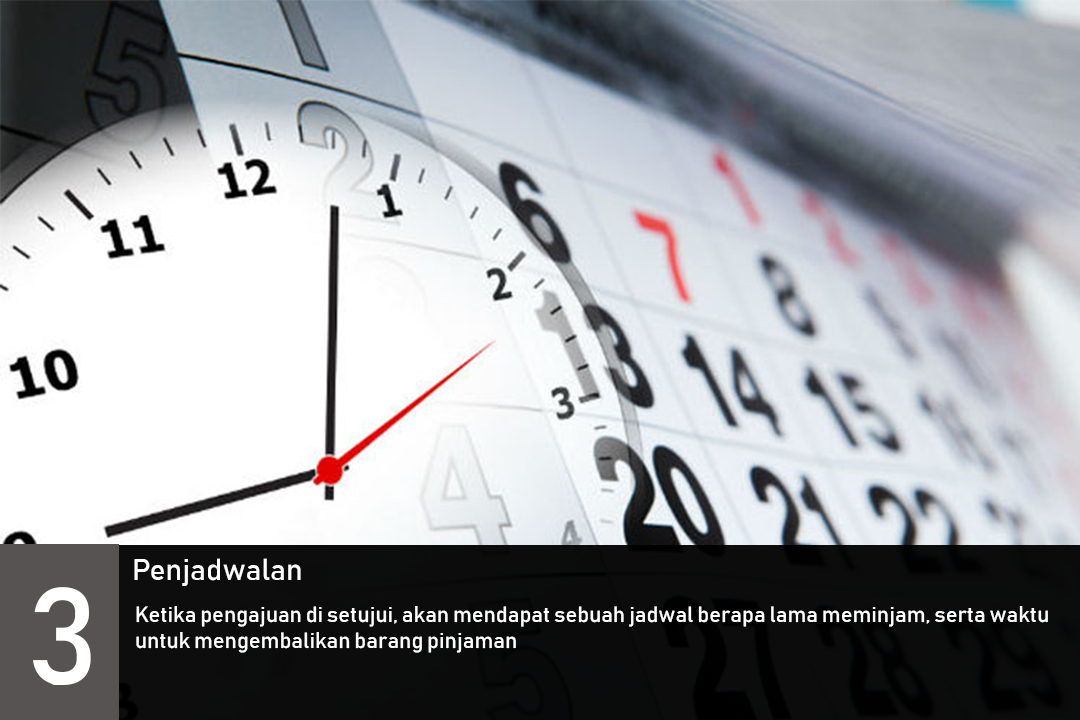
<style>
.page{position:relative;width:1080px;height:720px}
.page>*{position:absolute;margin:0}
.t1{font:30px "Bahnschrift";color:#ffffff}
.t2{font:135.3px "Bahnschrift";color:#ffffff}
.t3{font:22px "Bahnschrift";color:#ffffff}
</style>
<div class="page">
<p class="t1" style="left:134px;top:558px;width:167px;height:28px">Penjadwalan</p>
<p class="t2" style="left:33px;top:587px;width:58px;height:98px">3</p>
<p class="t3" style="left:136px;top:606px;width:912px;height:47px">Ketika pengajuan di setujui, akan mendapat sebuah jadwal berapa lama meminjam, serta waktu untuk mengembalikan barang pinjaman</p>
</div>
